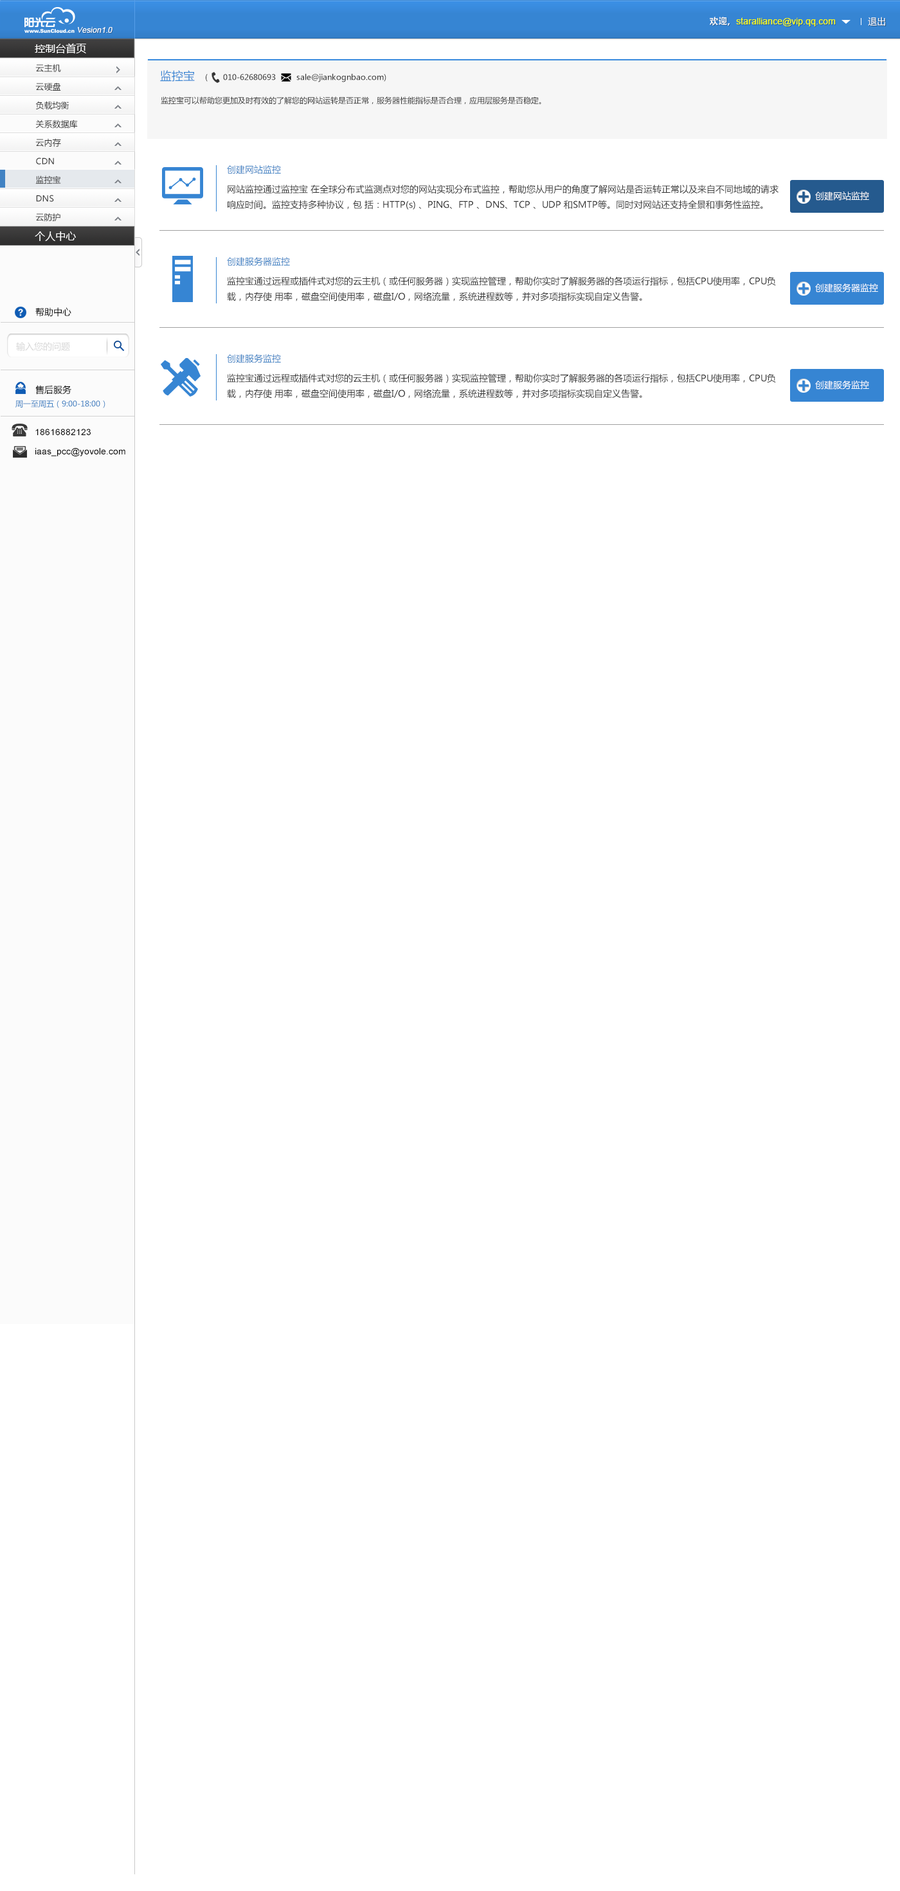
<style>
.page{position:relative;width:900px;height:1891px;background:#ffffff}
.page>*{position:absolute;margin:0}
.t1{font:9px "ArialMT";color:#fcff0e}
.t2{font:9px "AdobeHeitiStd-Regular";color:#ffffff}
.t3{font:9px "MicrosoftYaHei";color:#ffffff}
.t4{font:7.7px "ArialMT";color:#ffffff;font-style:italic}
.t5{font:10.3px "MicrosoftYaHei";color:#ffffff}
.t6{font:8.4px "MicrosoftYaHei";color:#333333}
.t7{font:11.6px "MicrosoftYaHei";color:#3685d3}
.t8{font:7.7px "MicrosoftYaHei";color:#333333}
.t9{font:9px "MicrosoftYaHei";color:#4182c3}
.t10{font:9px/15.4px "MicrosoftYaHei";color:#333333}
.t11{font:9px "MicrosoftYaHei";color:#000000}
.t12{font:9px "MicrosoftYaHei";color:#d7d7d7}
.t13{font:7.7px "MicrosoftYaHei";color:#4182c3}
.t14{font:9px/6.4px "ArialMT";color:#000000}
</style>
<div class="page">
<p class="t1" style="left:710px;top:17px;width:126px;height:9px"><span class="t2">欢迎，</span>staralliance@vip.qq.com</p>
<p class="t3" style="left:868px;top:17px;width:17px;height:9px">退出</p>
<p class="t4" style="left:78px;top:27px;width:35px;height:6px">Vesion1.0</p>
<p class="t5" style="left:35px;top:43px;width:51px;height:11px">控制台首页</p>
<p class="t6" style="left:35px;top:64px;width:26px;height:9px">云主机</p>
<p class="t7" style="left:160px;top:70px;width:35px;height:12px">监控宝</p>
<p class="t8" style="left:206px;top:73px;width:180px;height:9px">(      010-62680693        sale@jiankognbao.com)</p>
<p class="t6" style="left:35px;top:82px;width:26px;height:9px">云硬盘</p>
<p class="t6" style="left:35px;top:101px;width:34px;height:9px">负载均衡</p>
<p class="t8" style="left:161px;top:96px;width:380px;height:9px">监控宝可以帮助您更加及时有效的了解您的网站运转是否正常，服务器性能指标是否合理，应用层服务是否稳定。</p>
<p class="t6" style="left:35px;top:120px;width:43px;height:9px">关系数据库</p>
<p class="t6" style="left:35px;top:138px;width:26px;height:9px">云内存</p>
<p class="t6" style="left:36px;top:158px;width:18px;height:7px">CDN</p>
<p class="t9" style="left:227px;top:165px;width:54px;height:9px">创建网站监控</p>
<p class="t6" style="left:35px;top:176px;width:26px;height:8px">监控宝</p>
<p class="t10" style="left:228px;top:184px;width:551px;height:26px">网站监控通过监控宝 在全球分布式监测点对您的网站实现分布式监控，帮助您从用户的角度了解网站是否运转正常以及来自不同地域的请求响应时间。监控支持多种协议，包 括：HTTP(s) 、PING、FTP 、DNS、TCP 、UDP 和SMTP等。同时对网站还支持全景和事务性监控。</p>
<p class="t6" style="left:36px;top:195px;width:18px;height:7px">DNS</p>
<p class="t3" style="left:815px;top:192px;width:54px;height:9px">创建网站监控</p>
<p class="t6" style="left:35px;top:213px;width:25px;height:9px">云防护</p>
<p class="t5" style="left:35px;top:231px;width:41px;height:10px">个人中心</p>
<p class="t9" style="left:227px;top:257px;width:63px;height:9px">创建服务器监控</p>
<p class="t10" style="left:227px;top:276px;width:549px;height:26px">监控宝通过远程或插件式对您的云主机（或任何服务器）实现监控管理，帮助你实时了解服务器的各项运行指标，包括CPU使用率，CPU负载，内存使 用率，磁盘空间使用率，磁盘I/O，网络流量，系统进程数等，并对多项指标实现自定义告警。</p>
<p class="t3" style="left:815px;top:284px;width:63px;height:8px">创建服务器监控</p>
<p class="t11" style="left:35px;top:307px;width:36px;height:10px">帮助中心</p>
<p class="t12" style="left:16px;top:342px;width:54px;height:9px">输入您的问题</p>
<p class="t9" style="left:227px;top:354px;width:54px;height:9px">创建服务监控</p>
<p class="t10" style="left:227px;top:374px;width:549px;height:25px">监控宝通过远程或插件式对您的云主机（或任何服务器）实现监控管理，帮助你实时了解服务器的各项运行指标，包括CPU使用率，CPU负载，内存使 用率，磁盘空间使用率，磁盘I/O，网络流量，系统进程数等，并对多项指标实现自定义告警。</p>
<p class="t11" style="left:35px;top:385px;width:36px;height:10px">售后服务</p>
<p class="t3" style="left:815px;top:381px;width:54px;height:9px">创建服务监控</p>
<p class="t13" style="left:15px;top:401px;width:90px;height:7px">周一至周五（9:00-18:00）</p>
<p class="t14" style="left:35px;top:429px;width:90px;height:27px">18616882123   <br><br><br>iaas_pcc@yovole.com</p>
</div>
